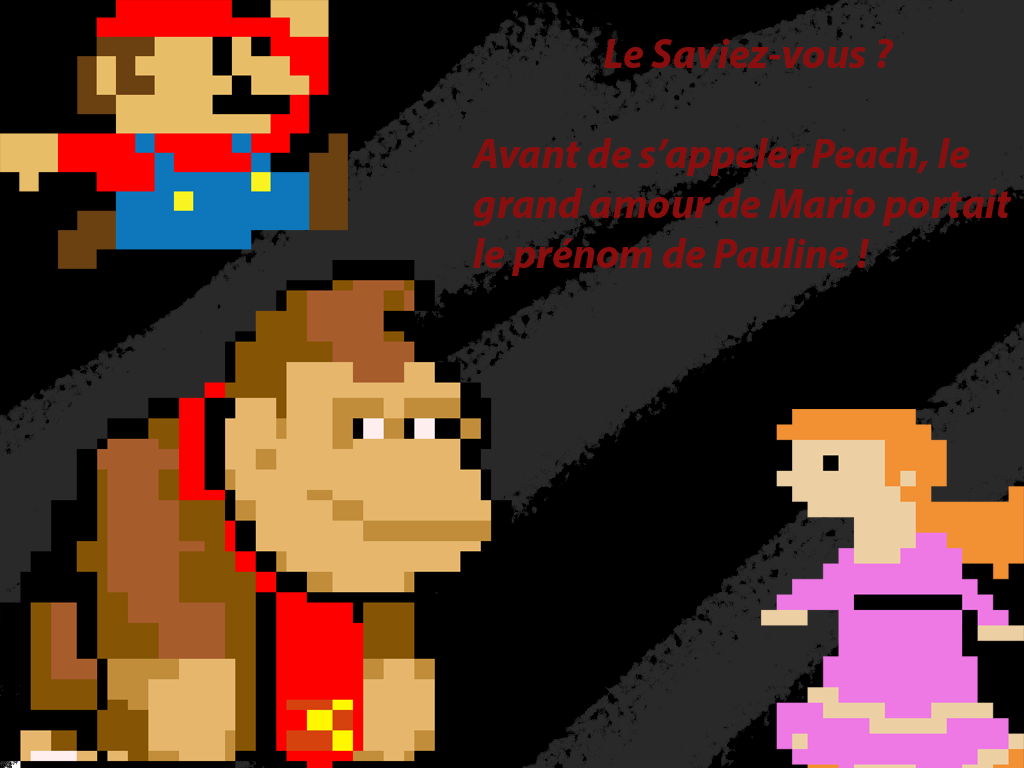
<style>
.page{position:relative;width:1024px;height:768px;background:#000000}
.page>*{position:absolute;margin:0}
.t1{font:41.7px "MyriadPro-BoldIt";color:#8a0e0e}
</style>
<div class="page">
<p class="t1" style="left:472px;top:38px;width:540px;height:238px;text-align:center">Le Saviez-vous ?<br><br>Avant de s’appeler Peach, le grand amour de Mario portait le prénom de Pauline !</p>
</div>
